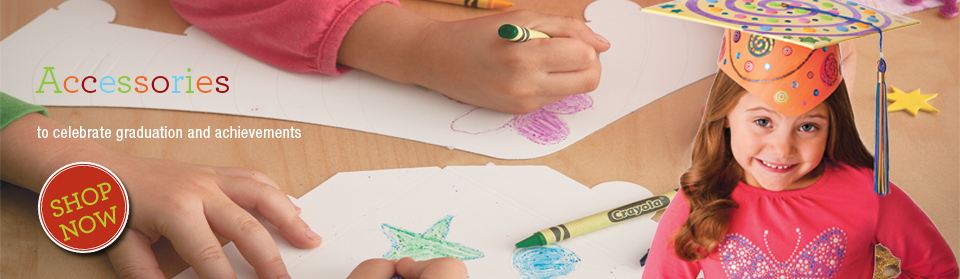
<style>
.page{position:relative;width:960px;height:279px}
.page>*{position:absolute;margin:0}
.t1{font:39.3px "Archer-Book";color:#8dc63f}
.t2{font:39.3px "Archer-Book";color:#f26522}
.t3{font:39.3px "Archer-Book";color:#9e0b0f}
.t4{font:39.3px "Archer-Book";color:#6dcff6}
.t5{font:16px "HelveticaNeueLTStd-Cn";letter-spacing:0.025em;color:#ffffff}
</style>
<div class="page">
<p class="t1" style="left:35px;top:67px;width:194px;height:26px">A<span class="t2">c</span><span class="t3">c</span><span class="t4">e</span>s<span class="t2">s</span><span class="t3">o</span><span class="t4">r</span>i<span class="t2">e</span><span class="t3">s</span></p>
<p class="t5" style="left:37px;top:126px;width:264px;height:15px">to celebrate graduation and achievements</p>
</div>
